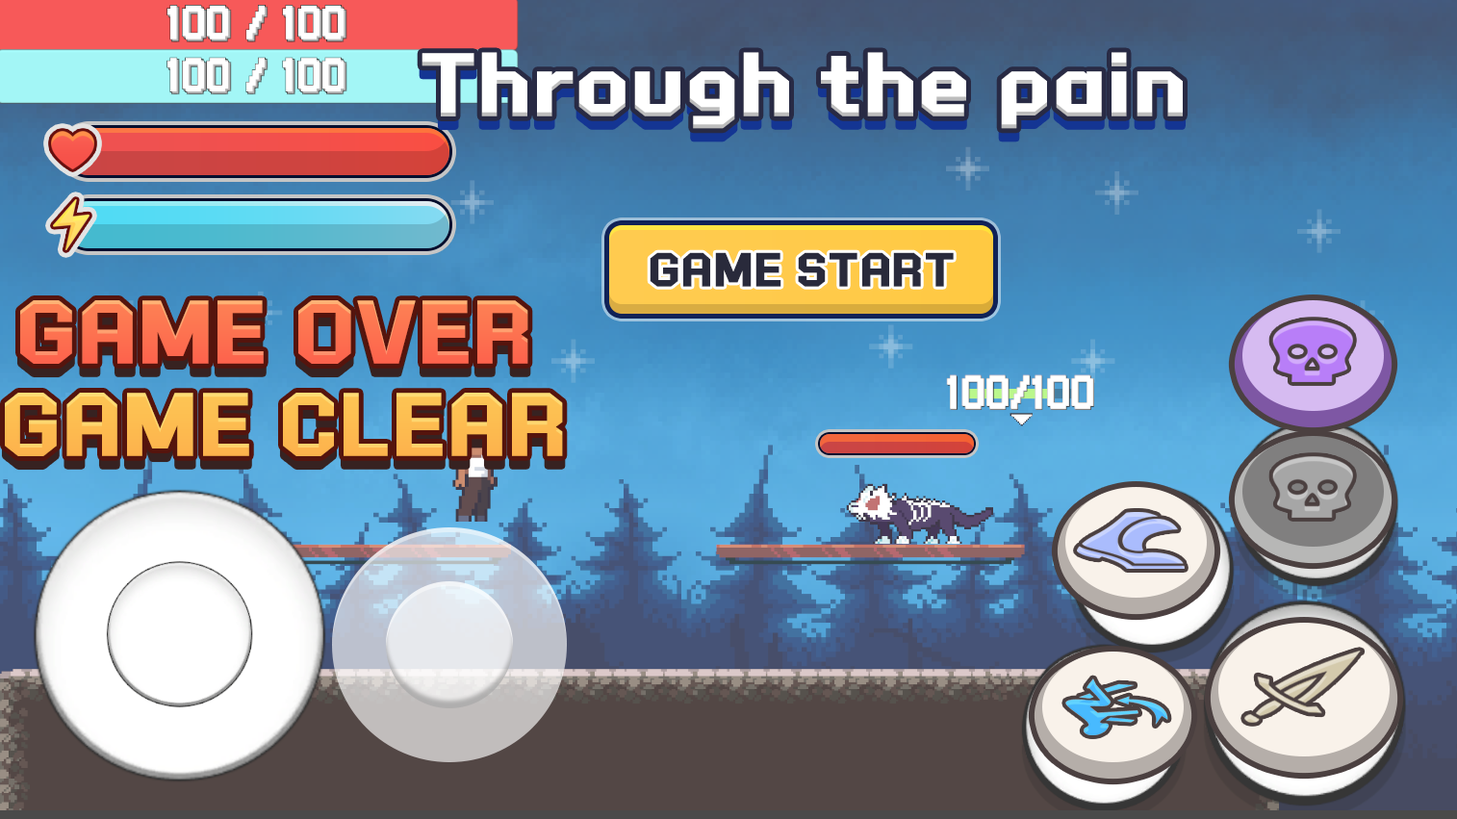
<style>
.page{position:relative;width:1457px;height:819px}
.page>*{position:absolute;margin:0}
.t1{font:72.2px "BlockbusterN-Otf-Bold";color:#ffffff;font-weight:bold}
.t2{font:38.5px "BlockbusterN-Otf-Bold";color:#292a3b;text-transform:uppercase;font-weight:bold}
.t3{font:72.2px "BlockbusterN-Otf-Bold";color:#fd7451;font-weight:bold}
.t4{font:72.2px "BlockbusterN-Otf-Bold";color:#fdbd51;text-transform:uppercase;font-weight:bold}
</style>
<div class="page">
<p class="t1" style="left:421px;top:52px;width:761px;height:77px">Through the pain</p>
<p class="t2" style="left:649px;top:252px;width:304px;height:35px">game start</p>
<p class="t3" style="left:20px;top:300px;width:508px;height:64px">GAME OVER</p>
<p class="t4" style="left:5px;top:393px;width:558px;height:63px">game clear</p>
</div>
